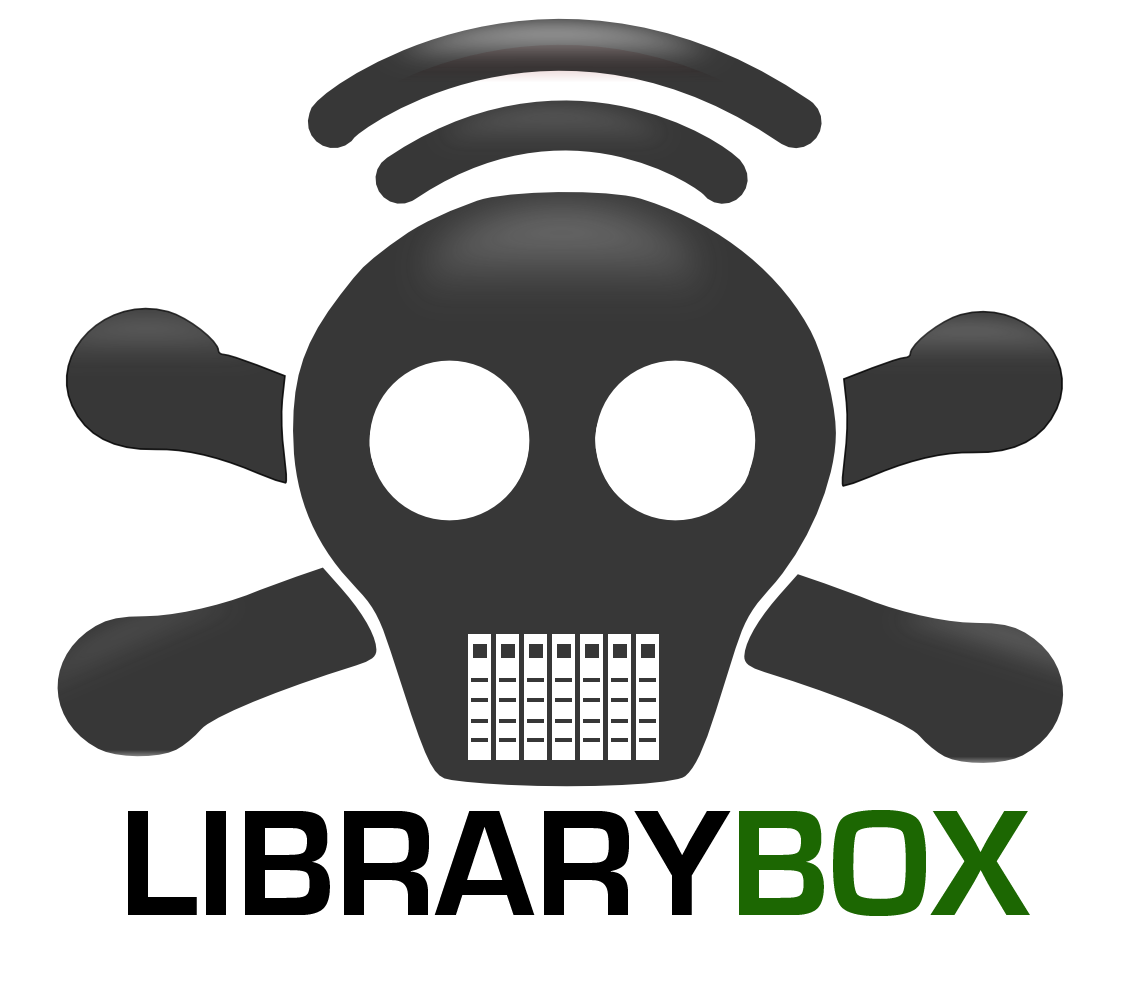
<style>
.page{position:relative;width:1136px;height:1002px;background:#ffffff}
.page>*{position:absolute;margin:0}
.t1{font:156.3px "EurostileBold";color:#000000}
.t2{font:156.3px "EurostileBold";color:#1c6702}
</style>
<div class="page">
<p class="t1" style="left:128px;top:810px;width:902px;height:106px">LIBRARY<span class="t2">BOX</span></p>
</div>
